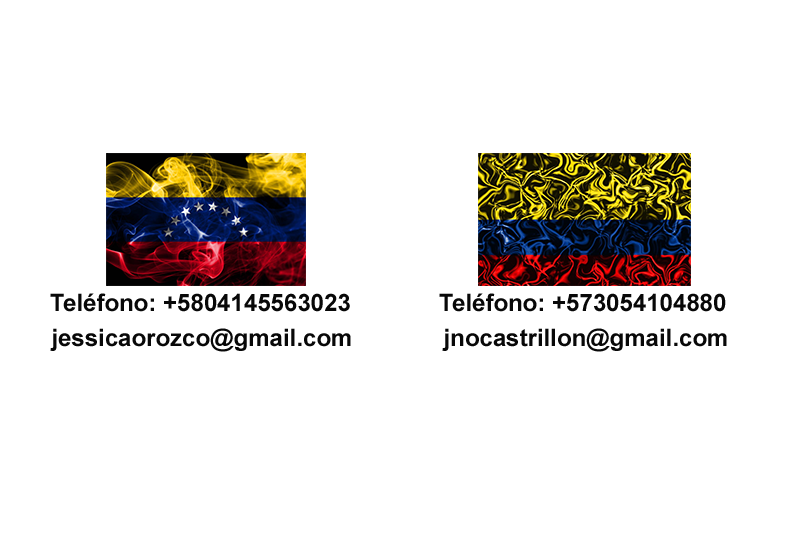
<style>
.page{position:relative;width:800px;height:533px;background:#ffffff}
.page>*{position:absolute;margin:0}
.t1{font:24px "Arial-BoldMT";color:#080808}
</style>
<div class="page">
<p class="t1" style="left:50px;top:293px;width:300px;height:19px">Teléfono: +5804145563023</p>
<p class="t1" style="left:439px;top:293px;width:287px;height:19px">Teléfono: +573054104880</p>
<p class="t1" style="left:50px;top:328px;width:301px;height:24px">jessicaorozco@gmail.com</p>
<p class="t1" style="left:442px;top:328px;width:285px;height:24px">jnocastrillon@gmail.com</p>
</div>
